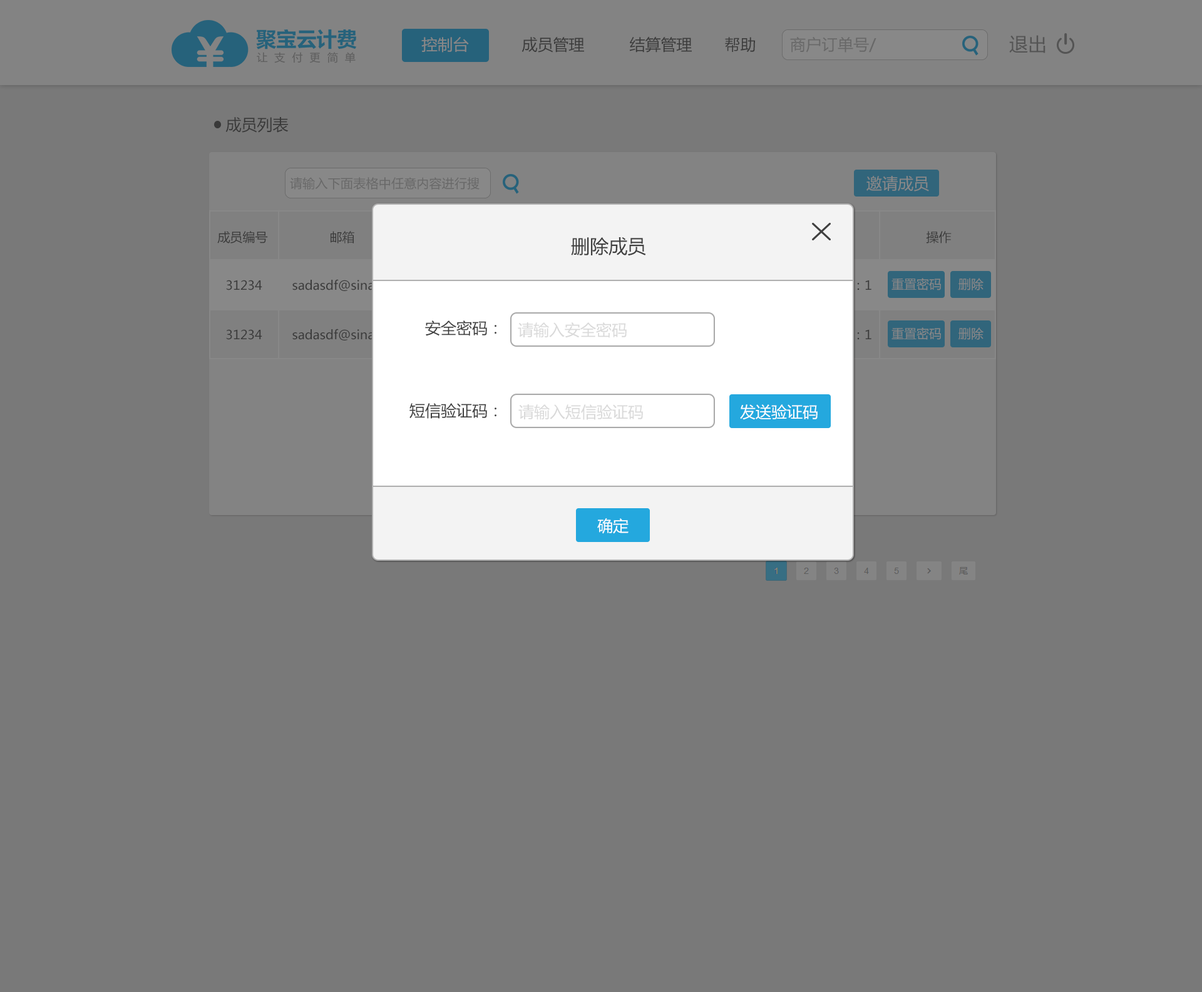
<style>
.page{position:relative;width:1202px;height:992px;background:#797979}
.page>*{position:absolute;margin:0}
.t1{font:15.6px "MicrosoftYaHei";color:#888888}
.t2{font:15.6px "MicrosoftYaHei";color:#3f3f3f}
.t3{font:15.6px "MicrosoftYaHei";color:#686868}
.t4{font:18.8px "MicrosoftYaHei";color:#545454}
.t5{font:15.6px "MicrosoftYaHei";color:#3a3a3a}
.t6{font:12.5px "MicrosoftYaHei";color:#686868}
.t7{font:12.5px "MicrosoftYaHei";color:#3a3a3a}
.t8{font:18.8px "MicrosoftYaHei";color:#3f3f3f}
.t9{font:12.5px "MicrosoftYaHei";color:#3f3f3f}
.t10{font:12.5px "MicrosoftYaHei";color:#888888}
.t11{font:15.6px "MicrosoftYaHei";color:#d9d9d9}
.t12{font:15.6px "MicrosoftYaHei";color:#ffffff}
</style>
<div class="page">
<p class="t1" style="left:421px;top:37px;width:48px;height:16px">控制台</p>
<p class="t2" style="left:521px;top:37px;width:63px;height:16px">成员管理</p>
<p class="t2" style="left:629px;top:37px;width:63px;height:16px">结算管理</p>
<p class="t2" style="left:725px;top:37px;width:30px;height:15px">帮助</p>
<p class="t3" style="left:790px;top:37px;width:86px;height:16px">商户订单号/ 聚宝订单号/ 付款方名称</p>
<p class="t4" style="left:1009px;top:35px;width:36px;height:18px">退出</p>
<p class="t5" style="left:225px;top:117px;width:64px;height:16px">成员列表</p>
<p class="t6" style="left:290px;top:177px;width:189px;height:13px">请输入下面表格中任意内容进行搜索</p>
<p class="t1" style="left:866px;top:176px;width:63px;height:16px">邀请成员</p>
<p class="t7" style="left:217px;top:231px;width:51px;height:13px">成员编号</p>
<p class="t7" style="left:331px;top:231px;width:23px;height:13px">邮箱</p>
<p class="t7" style="left:926px;top:231px;width:25px;height:13px">操作</p>
<p class="t8" style="left:571px;top:237px;width:75px;height:19px">删除成员</p>
<p class="t9" style="left:226px;top:280px;width:36px;height:10px">31234</p>
<p class="t9" style="left:292px;top:279px;width:110px;height:12px">sadasdf@sina.com</p>
<p class="t10" style="left:891px;top:278px;width:50px;height:12px">重置密码</p>
<p class="t10" style="left:958px;top:278px;width:25px;height:12px">删除</p>
<p class="t9" style="left:226px;top:329px;width:36px;height:11px">31234</p>
<p class="t2" style="left:425px;top:320px;width:71px;height:16px">安全密码：</p>
<p class="t11" style="left:518px;top:322px;width:109px;height:16px">请输入安全密码</p>
<p class="t10" style="left:891px;top:327px;width:50px;height:13px">重置密码</p>
<p class="t10" style="left:958px;top:327px;width:25px;height:13px">删除</p>
<p class="t2" style="left:409px;top:403px;width:87px;height:16px">短信验证码：</p>
<p class="t11" style="left:518px;top:404px;width:125px;height:16px">请输入短信验证码</p>
<p class="t12" style="left:740px;top:404px;width:78px;height:16px">发送验证码</p>
<p class="t12" style="left:597px;top:518px;width:31px;height:16px">确定</p>
</div>
